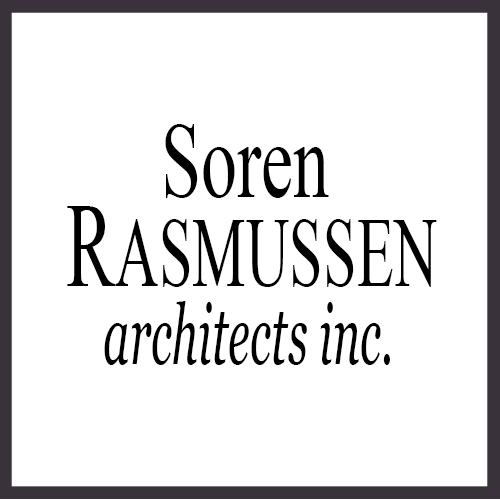
<style>
.page{position:relative;width:500px;height:500px;background:#ffffff}
.page>*{position:absolute;margin:0}
.t1{font:107px "TimesNewRomanPSMT";color:#000000;scale:0.67 1}
.t2{font:99.3px "TimesNewRomanPSMT";color:#000000;text-transform:uppercase;scale:0.61 1}
.t3{font:120.3px "TimesNewRomanPSMT";color:#000000;text-transform:uppercase;scale:0.61 1}
.t4{font:83.3px "Georgia-Italic";color:#000000;scale:0.56 1}
</style>
<div class="page">
<p class="t1" style="left:165px;top:124px;width:164px;height:74px">Soren</p>
<p class="t2" style="left:67px;top:206px;width:370px;height:81px"><span class="t3">R</span>asmussen</p>
<p class="t4" style="left:104px;top:301px;width:286px;height:64px">architects inc.</p>
</div>
